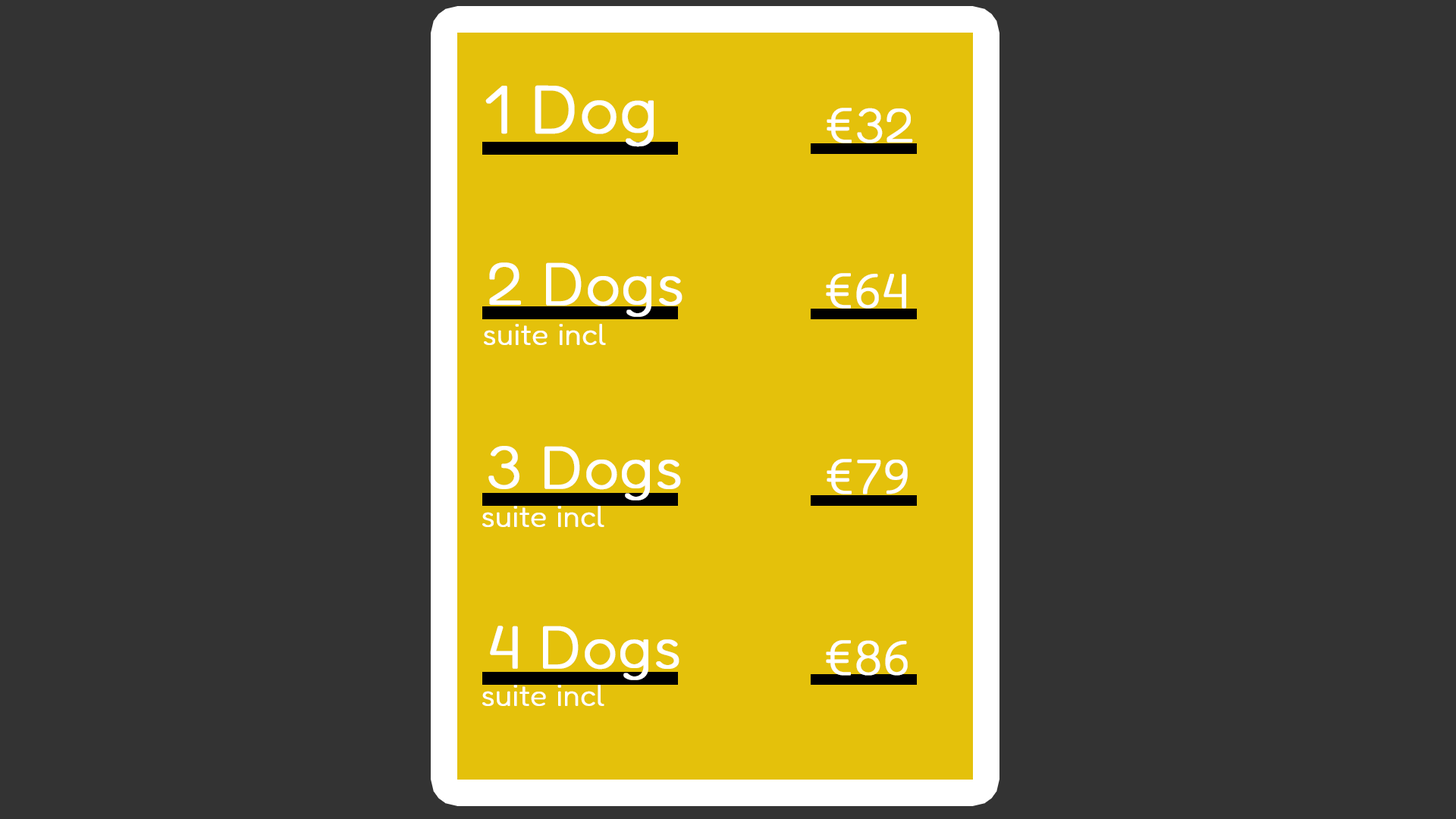
<style>
.page{position:relative;width:1456px;height:819px;background:#333333}
.page>*{position:absolute;margin:0}
.t1{font:67.4px "Fredoka-Light";color:#ffffff;font-weight:bold}
.t2{font:48.2px "Fredoka-Light";color:#ffffff;font-weight:bold}
.t3{font:59.9px "Fredoka-Light";color:#ffffff;font-weight:bold}
.t4{font:29.6px "Fredoka-Light";color:#ffffff;font-weight:bold}
</style>
<div class="page">
<p class="t1" style="left:485px;top:85px;width:169px;height:62px">1 Dog</p>
<p class="t2" style="left:827px;top:108px;width:86px;height:35px">€32</p>
<p class="t3" style="left:489px;top:262px;width:193px;height:55px">2 Dogs</p>
<p class="t2" style="left:826px;top:273px;width:80px;height:36px">€64</p>
<p class="t4" style="left:484px;top:324px;width:122px;height:21px">suite incl</p>
<p class="t3" style="left:488px;top:446px;width:193px;height:54px">3 Dogs</p>
<p class="t2" style="left:827px;top:459px;width:81px;height:35px">€79</p>
<p class="t4" style="left:482px;top:506px;width:122px;height:21px">suite incl</p>
<p class="t3" style="left:490px;top:626px;width:189px;height:54px">4 Dogs</p>
<p class="t2" style="left:826px;top:640px;width:82px;height:36px">€86</p>
<p class="t4" style="left:482px;top:685px;width:122px;height:21px">suite incl</p>
</div>
